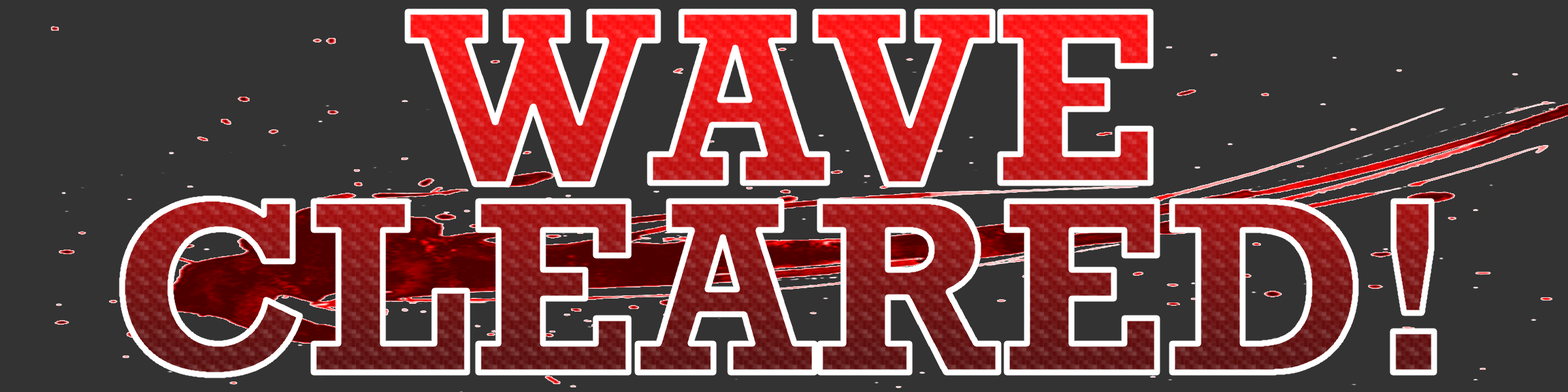
<style>
.page{position:relative;width:1568px;height:392px;background:#333333}
.page>*{position:absolute;margin:0}
.t1{font:252.2px/189.2px "Rockwell-Bold"}
</style>
<div class="page">
<p class="t1" style="left:122px;top:12px;width:1312px;height:363px;text-align:center">WAVE<br>CLEARED!</p>
</div>
